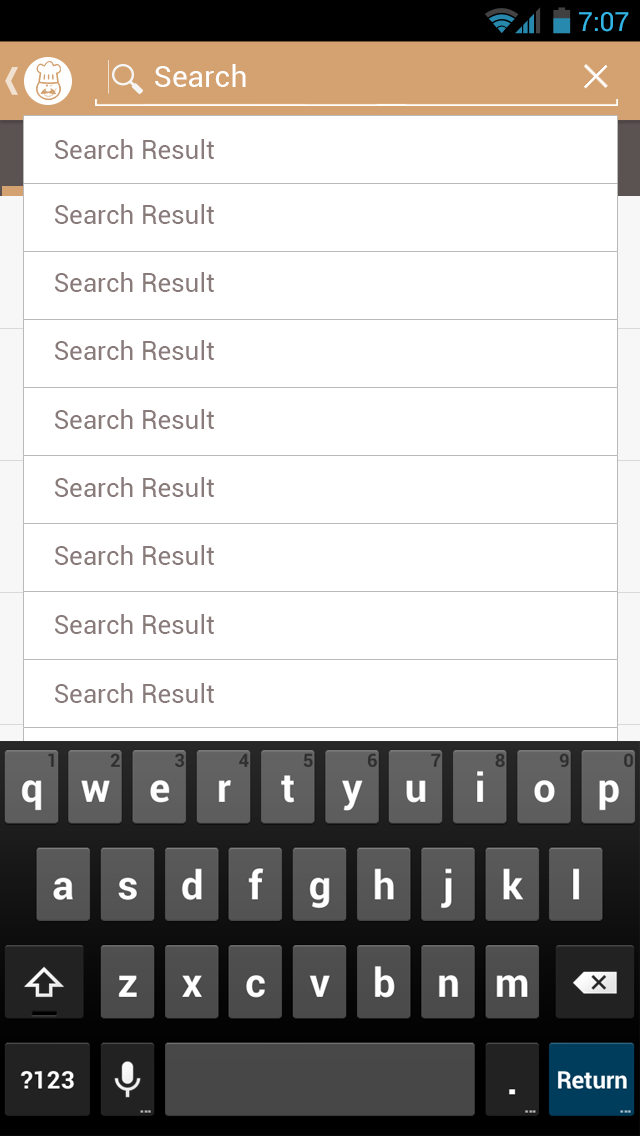
<style>
.page{position:relative;width:640px;height:1136px;background:#ffffff}
.page>*{position:absolute;margin:0}
.t1{font:26.6px "Roboto-Regular";color:#33b5e5}
.t2{font:30.1px "Roboto-Regular";color:#ffffff}
.t3{font:26px "Roboto-Regular";color:#8a7b7b}
</style>
<div class="page">
<p class="t1" style="left:579px;top:12px;width:50px;height:20px">7:07</p>
<p class="t2" style="left:155px;top:64px;width:91px;height:23px">Search</p>
<p class="t3" style="left:55px;top:139px;width:159px;height:20px">Search Result</p>
<p class="t3" style="left:55px;top:204px;width:159px;height:20px">Search Result</p>
<p class="t3" style="left:55px;top:272px;width:159px;height:20px">Search Result</p>
<p class="t3" style="left:55px;top:340px;width:159px;height:20px">Search Result</p>
<p class="t3" style="left:55px;top:409px;width:159px;height:20px">Search Result</p>
<p class="t3" style="left:55px;top:477px;width:159px;height:20px">Search Result</p>
<p class="t3" style="left:55px;top:545px;width:159px;height:20px">Search Result</p>
<p class="t3" style="left:55px;top:614px;width:159px;height:20px">Search Result</p>
<p class="t3" style="left:55px;top:683px;width:159px;height:20px">Search Result</p>
</div>
